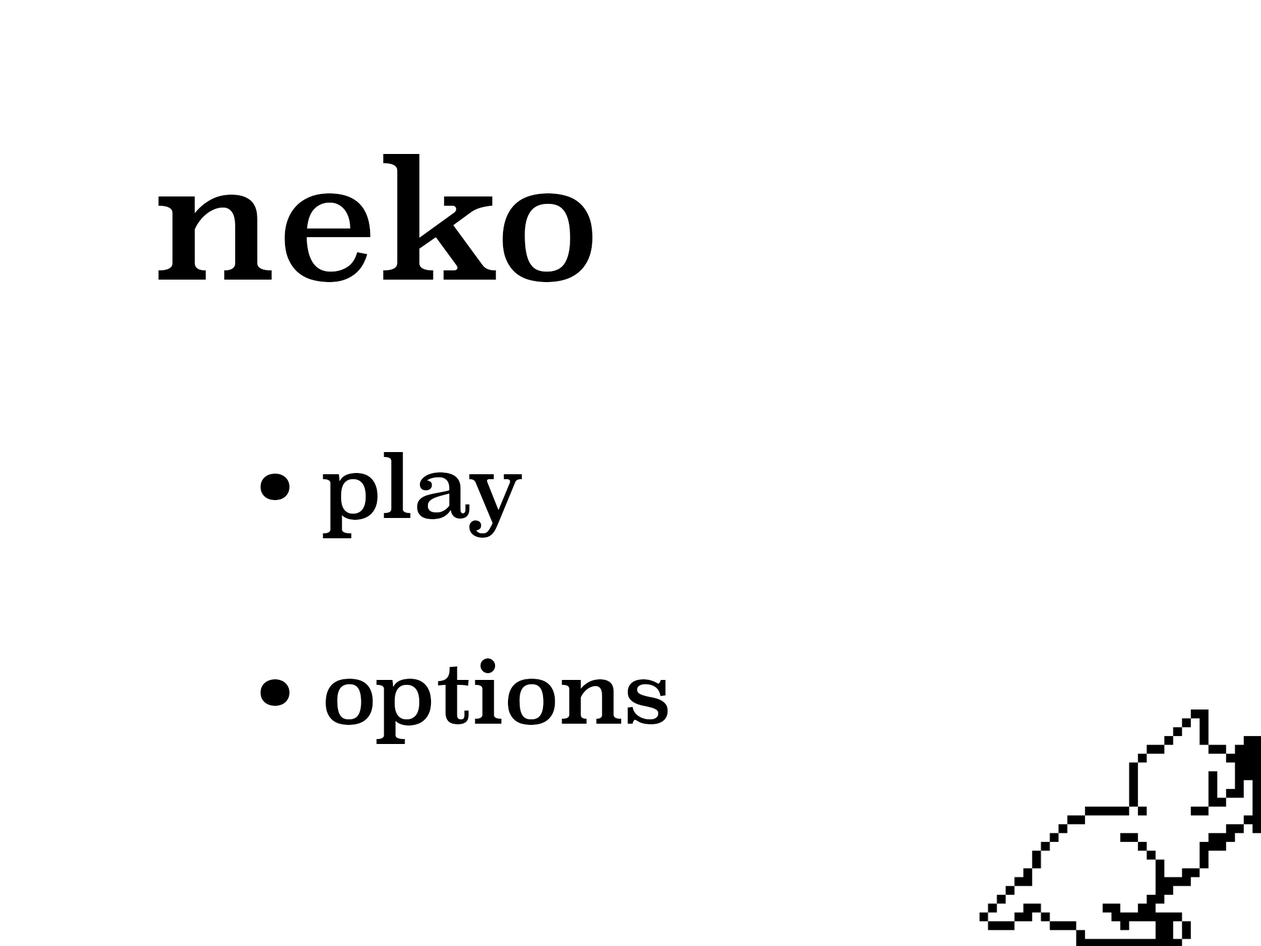
<style>
.page{position:relative;width:1261px;height:946px;background:#ffffff}
.page>*{position:absolute;margin:0}
.t1{font:163.2px "Superclarendon-Regular";color:#000000}
.t2{font:85.6px "Superclarendon-Regular";color:#000000}
</style>
<div class="page">
<p class="t1" style="left:158px;top:154px;width:435px;height:128px">neko</p>
<p class="t2" style="left:260px;top:452px;width:408px;height:292px">• play<br><br>• options</p>
</div>
